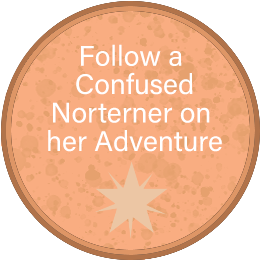
<style>
.page{position:relative;width:262px;height:262px;background:#f9ad81}
.page>*{position:absolute;margin:0}
.t1{font:28.4px/28.4px "AcuminConcept-Regular";color:#ffffff}
</style>
<div class="page">
<p class="t1" style="left:48px;top:44px;width:174px;height:108px;text-align:center">Follow a <br>Confused<br>Norterner on <br>her Adventure</p>
</div>
